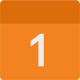
<style>
.page{position:relative;width:80px;height:80px;background:#f38320}
.page>*{position:absolute;margin:0}
.t1{font:49.9px "EstrangeloEdessa";letter-spacing:-0.1em;color:#ebeded;font-weight:bold}
</style>
<div class="page">
<p class="t1" style="left:30px;top:33px;width:14px;height:34px">1</p>
</div>
